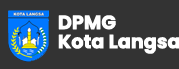
<style>
.page{position:relative;width:179px;height:69px;background:#333333}
.page>*{position:absolute;margin:0}
.t1{font:19px/19.2px "Poppins-Bold";letter-spacing:-0.02em;color:#ffffff;font-weight:bold}
</style>
<div class="page">
<p class="t1" style="left:58px;top:15px;width:122px;height:39px">DPMG<br>Kota Langsa</p>
</div>
